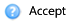
<style>
.page{position:relative;width:80px;height:22px;background:#ffffff}
.page>*{position:absolute;margin:0}
.t1{font:12px "MalgunGothicRegular";color:#060606}
</style>
<div class="page">
<p class="t1" style="left:29px;top:6px;width:37px;height:12px">Accept</p>
</div>
